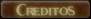
<style>
.page{position:relative;width:91px;height:19px}
.page>*{position:absolute;margin:0}
.t1{font:30px "Fleet-Street";color:#a3a37d}
</style>
<div class="page">
<p class="t1" style="left:16px;top:4px;width:59px;height:12px">Creditos</p>
</div>
